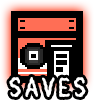
<style>
.page{position:relative;width:95px;height:100px;background:#000000}
.page>*{position:absolute;margin:0}
.t1{font:30px "Swampy-Clean";color:#ffffff}
</style>
<div class="page">
<p class="t1" style="left:9px;top:77px;width:77px;height:20px">SAVES</p>
</div>
